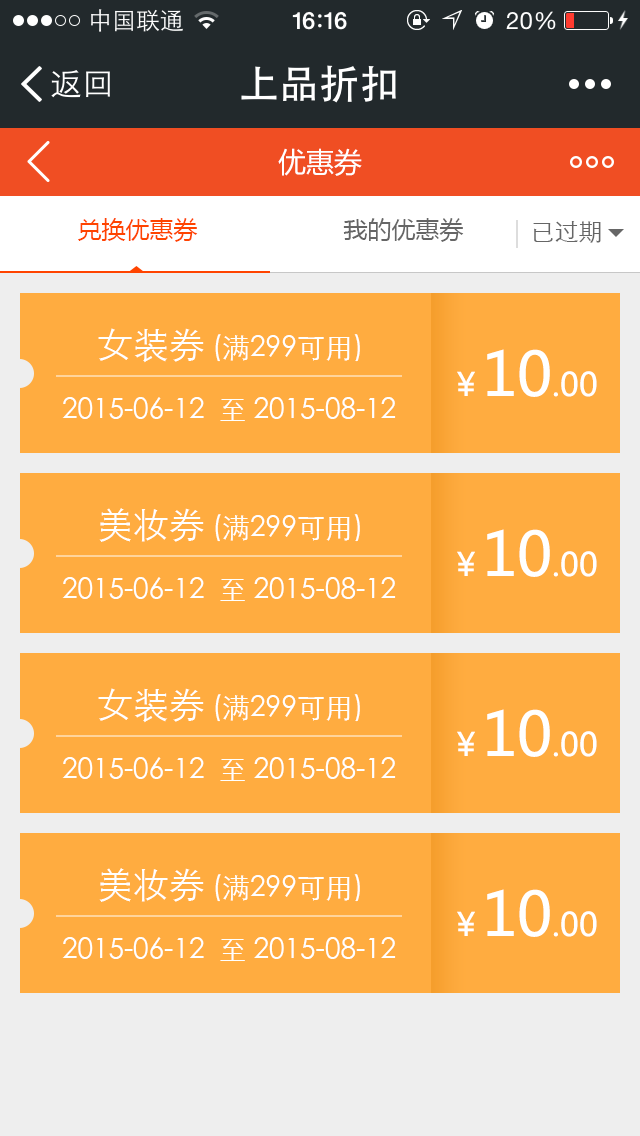
<style>
.page{position:relative;width:640px;height:1136px;background:#ffac40}
.page>*{position:absolute;margin:0}
.t1{font:28px "MicrosoftYaHei";color:#ffffff}
.t2{font:24px "MicrosoftYaHei";color:#ff4400}
.t3{font:24px "MicrosoftYaHei";color:#666666}
.t4{font:24px "STXihei";color:#666666}
.t5{font:28px "STXihei";color:#ffffff}
.t6{font:36px "STXihei";color:#ffffff}
.t7{font:32px "MicrosoftYaHei";color:#ffffff}
.t8{font:60px "MicrosoftYaHei";color:#ffffff}
</style>
<div class="page">
<p class="t1" style="left:278px;top:148px;width:84px;height:28px">优惠券</p>
<p class="t2" style="left:78px;top:218px;width:386px;height:24px">兑换优惠券<span class="t3">      我的优惠券</span></p>
<p class="t4" style="left:533px;top:221px;width:68px;height:22px">已过期</p>
<p class="t5" style="left:98px;top:328px;width:262px;height:35px"><span class="t6">女装券 </span>(满299可用)</p>
<p class="t7" style="left:457px;top:349px;width:140px;height:48px">￥<span class="t8">10</span>.00</p>
<p class="t5" style="left:62px;top:397px;width:334px;height:24px">2015-06-12  至 2015-08-12</p>
<p class="t5" style="left:99px;top:508px;width:261px;height:34px"><span class="t6">美妆券 </span>(满299可用)</p>
<p class="t7" style="left:457px;top:529px;width:140px;height:48px">￥<span class="t8">10</span>.00</p>
<p class="t5" style="left:62px;top:577px;width:334px;height:24px">2015-06-12  至 2015-08-12</p>
<p class="t5" style="left:98px;top:688px;width:262px;height:35px"><span class="t6">女装券 </span>(满299可用)</p>
<p class="t7" style="left:457px;top:709px;width:140px;height:48px">￥<span class="t8">10</span>.00</p>
<p class="t5" style="left:62px;top:757px;width:334px;height:24px">2015-06-12  至 2015-08-12</p>
<p class="t5" style="left:99px;top:868px;width:261px;height:34px"><span class="t6">美妆券 </span>(满299可用)</p>
<p class="t7" style="left:457px;top:889px;width:140px;height:48px">￥<span class="t8">10</span>.00</p>
<p class="t5" style="left:62px;top:937px;width:334px;height:24px">2015-06-12  至 2015-08-12</p>
</div>
